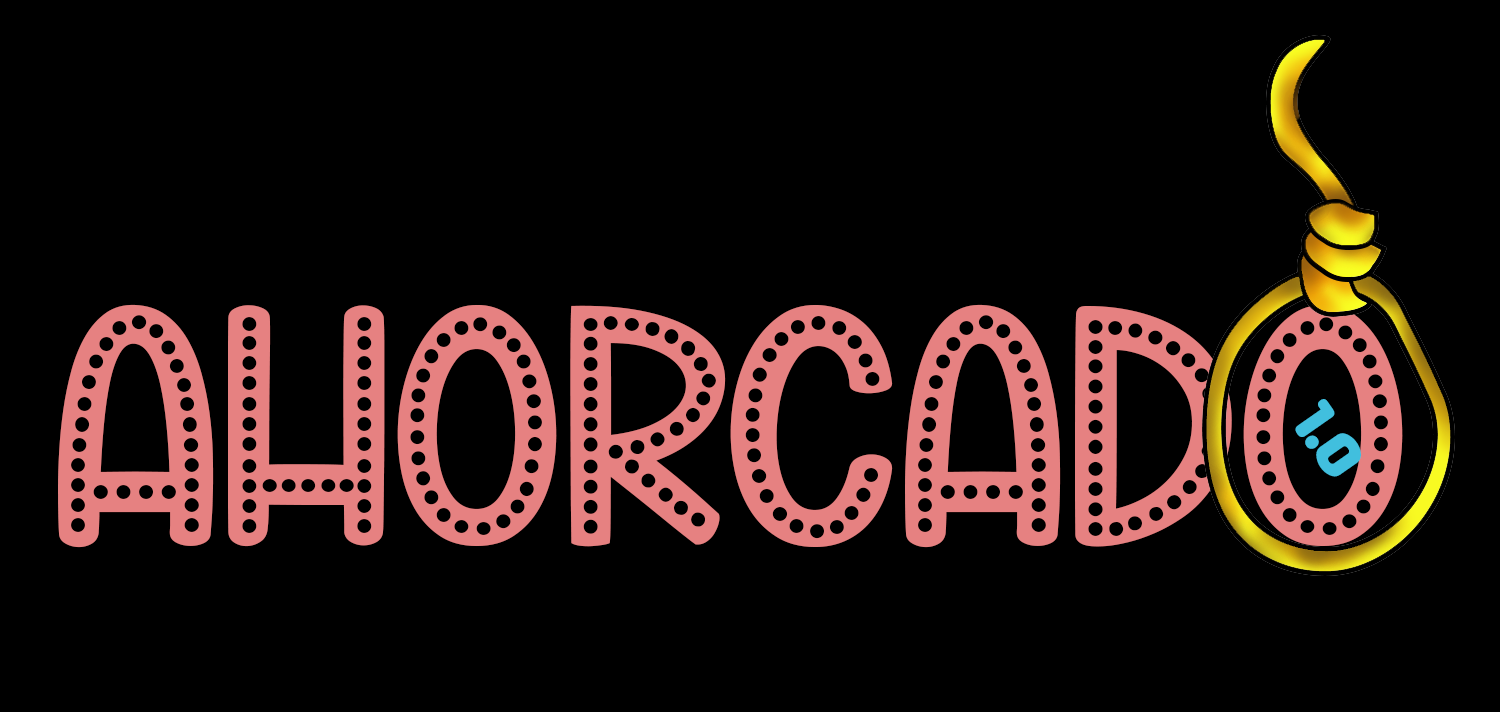
<style>
.page{position:relative;width:1500px;height:712px;background:#000000}
.page>*{position:absolute;margin:0}
.t1{font:342px "GreenRoomPersonalUseOnly";color:#e68181}
.t2{font:66px "Insaniburger";color:#41bfde}
</style>
<div class="page">
<p class="t1" style="left:58px;top:304px;width:1345px;height:244px">AHORCADO</p>
<p class="t2" style="left:1295px;top:399px;width:66px;height:78px;rotate:55deg">1.0</p>
</div>
